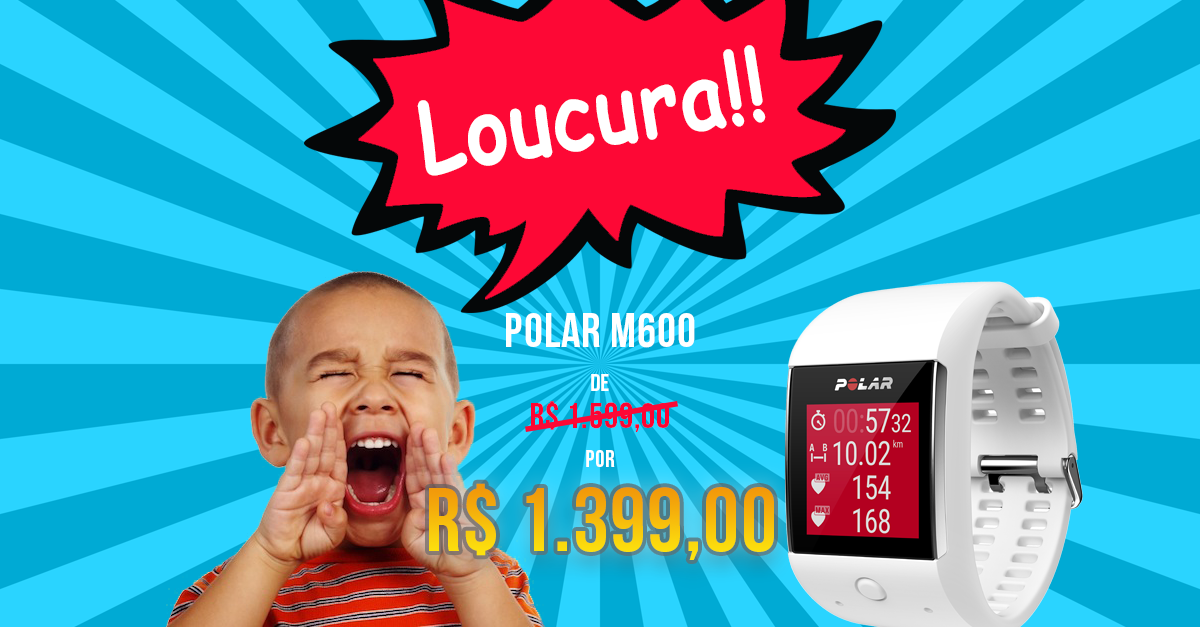
<style>
.page{position:relative;width:1200px;height:627px;background:#00aad4}
.page>*{position:absolute;margin:0}
.t1{font:95.9px "ComicSansMS-Bold";letter-spacing:0.02em;color:#ffffff;scale:0.85 1}
.t2{font:48px "BebasNeueBold";letter-spacing:0.02em;color:#ffffff}
.t3{font:24px "BebasNeueBold";letter-spacing:0.02em;color:#ffffff}
.t4{font:36px "BebasNeueBold";letter-spacing:0.02em;color:#ff0230}
.t5{font:90px "BebasNeueBold";letter-spacing:0.02em}
</style>
<div class="page">
<p class="t1" style="left:417px;top:45px;width:349px;height:131px;rotate:-9deg">Loucura!!</p>
<p class="t2" style="left:506px;top:313px;width:189px;height:35px">Polar M600</p>
<p class="t3" style="left:591px;top:374px;width:18px;height:17px">De</p>
<p class="t4" style="left:531px;top:401px;width:138px;height:31px">R$ 1.599,00</p>
<p class="t3" style="left:586px;top:450px;width:29px;height:17px">por</p>
<p class="t5" style="left:429px;top:483px;width:345px;height:77px">R$ 1.399,00</p>
</div>
